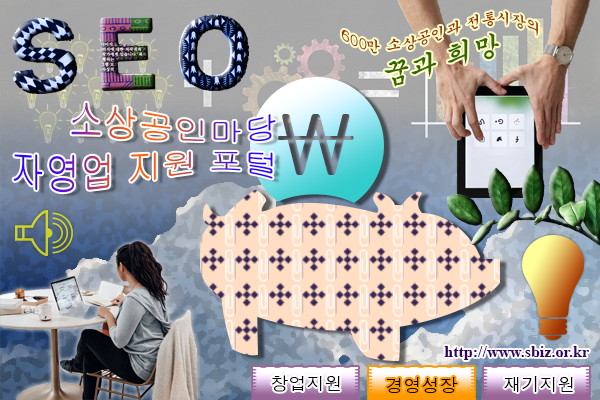
<style>
.page{position:relative;width:600px;height:400px}
.page>*{position:absolute;margin:0}
.t1{font:15px "Gungsuh";color:#993300}
.t2{font:27px "Gungsuh";color:#336600}
.t3{font:35px "Gulim"}
.t4{font:16px "TimesNewRomanPS-BoldMT";color:#330066}
.t5{font:18px "Dotum";color:#000000}
</style>
<div class="page">
<p class="t1" style="left:341px;top:11px;width:197px;height:76px;text-align:center">600만 소상공인과 전통시장의<br><span class="t2">꿈과 희망</span></p>
<p class="t3" style="left:13px;top:102px;width:263px;height:91px;text-align:right">소상공인마당<br>자영업 지원 포털</p>
<p class="t4" style="left:444px;top:346px;width:145px;height:14px">http://www.sbiz.or.kr</p>
<p class="t5" style="left:271px;top:375px;width:69px;height:17px">창업지원</p>
<p class="t5" style="left:386px;top:377px;width:72px;height:16px">경영성장</p>
<p class="t5" style="left:504px;top:376px;width:69px;height:16px">재기지원</p>
</div>
